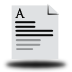
<style>
.page{position:relative;width:72px;height:72px;background:#dfe1e3}
.page>*{position:absolute;margin:0}
.t1{font:12.5px "TrajanPro-Regular";color:#070707}
</style>
<div class="page">
<p class="t1" style="left:15px;top:8px;width:10px;height:10px">A</p>
</div>
